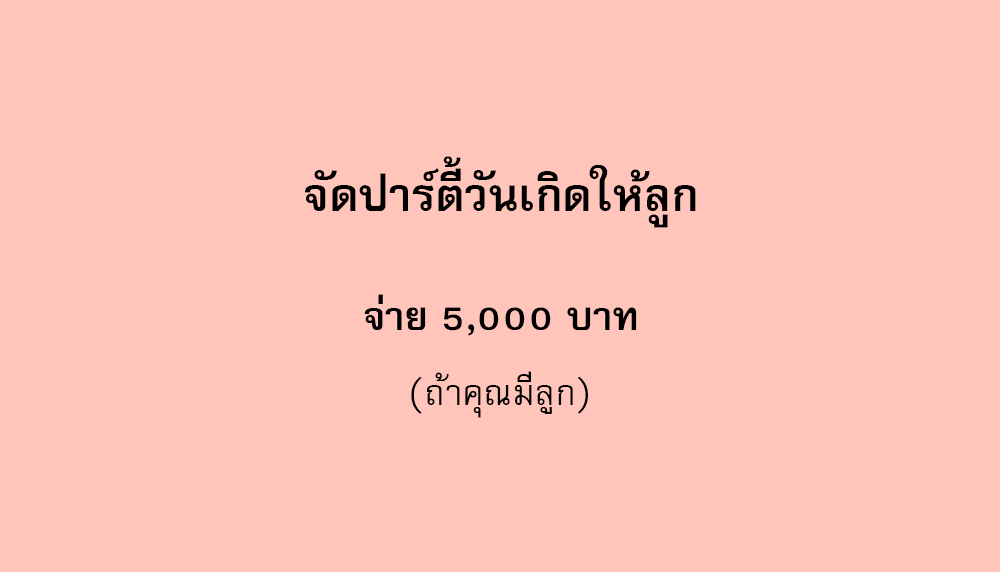
<style>
.page{position:relative;width:1000px;height:572px;background:#ffc4ba}
.page>*{position:absolute;margin:0}
.t1{font:64px "FreesiaUPCBold";color:#000000}
.t2{font:56px "FreesiaUPCBold";color:#000000}
.t3{font:50px "FreesiaUPC";color:#000000}
</style>
<div class="page">
<p class="t1" style="left:305px;top:156px;width:391px;height:72px">จัดปาร์ตี้วันเกิดให้ลูก</p>
<p class="t2" style="left:364px;top:294px;width:273px;height:42px">จ่าย 5,000 บาท</p>
<p class="t3" style="left:411px;top:371px;width:177px;height:47px">(ถ้าคุณมีลูก)</p>
</div>
